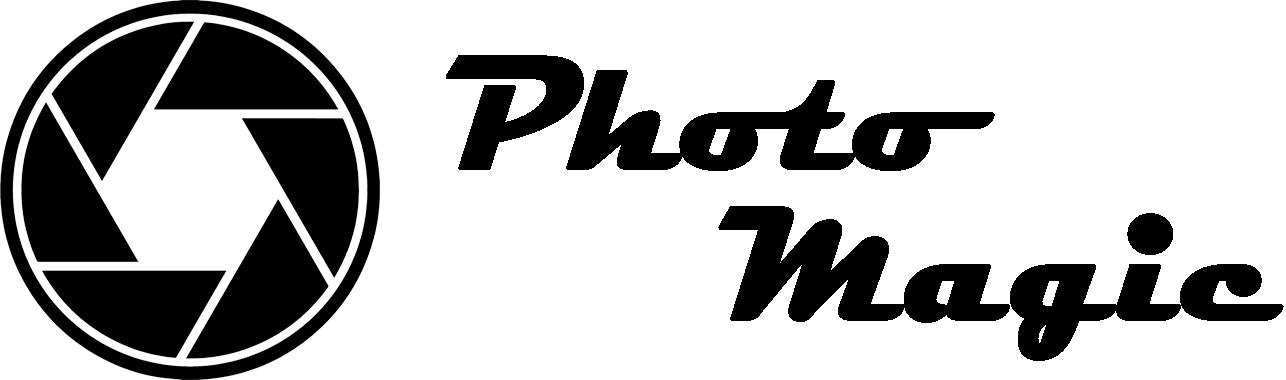
<style>
.page{position:relative;width:1286px;height:380px;background:#ffffff}
.page>*{position:absolute;margin:0}
.t1{font:161.6px "Magneto-Bold";color:#000000;font-weight:bold}
.t2{font:161.4px "Magneto-Bold";color:#000000;font-weight:bold}
</style>
<div class="page">
<p class="t1" style="left:446px;top:55px;width:549px;height:116px">Photo</p>
<p class="t2" style="left:718px;top:206px;width:566px;height:155px">Magic</p>
</div>
